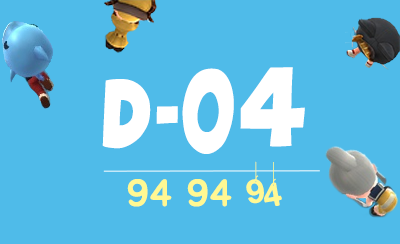
<style>
.page{position:relative;width:400px;height:244px;background:#4fbbe9}
.page>*{position:absolute;margin:0}
.t1{font:58px "Splatch";letter-spacing:0.005em;color:#ffffff}
.t2{font:52px "Splatch";letter-spacing:0.005em;color:#ffffff;scale:0.8 1}
.t3{font:68.3px "Splatch";letter-spacing:0.005em;color:#ffffff;scale:0.8 1}
.t4{font:68.3px "Splatch";letter-spacing:0.005em;color:#ffffff}
.t5{font:38.1px "HangingLetters";color:#fff893}
.t6{font:38.1px "BMJUA";color:#fff893}
</style>
<div class="page">
<p class="t1" style="left:102px;top:67px;width:203px;height:87px">D<span class="t2">-</span><span class="t3">0</span><span class="t4">4</span></p>
<p class="t5" style="left:246px;top:161px;width:36px;height:45px">94</p>
<p class="t6" style="left:127px;top:179px;width:45px;height:28px">94</p>
<p class="t6" style="left:187px;top:179px;width:45px;height:28px">94</p>
</div>
